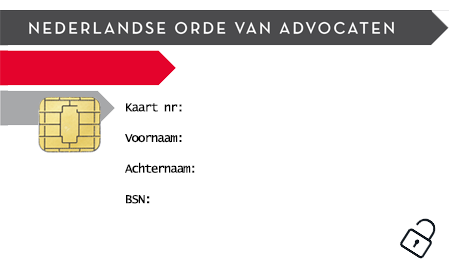
<style>
.page{position:relative;width:457px;height:272px;background:#ffffff}
.page>*{position:absolute;margin:0}
.t1{font:12.8px "LucidaConsole";letter-spacing:-0.09em;color:#000000}
</style>
<div class="page">
<p class="t1" style="left:125px;top:103px;width:70px;height:101px">Kaart nr:<br><br>Voornaam:<br><br>Achternaam:<br><br>BSN:</p>
</div>
